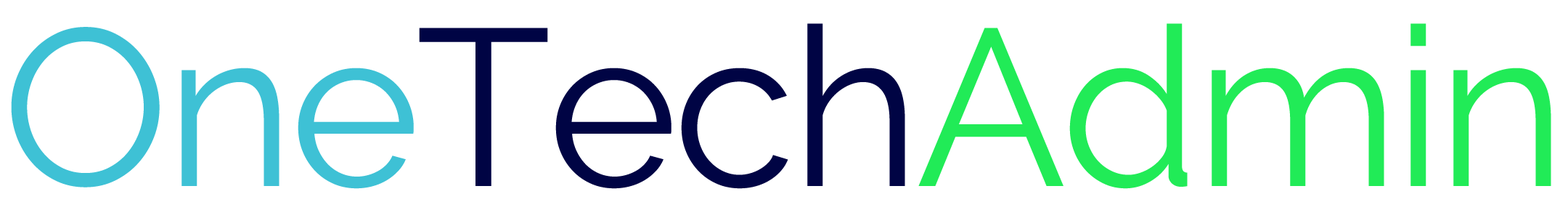
<style>
.page{position:relative;width:1568px;height:218px;background:#ffffff}
.page>*{position:absolute;margin:0}
.t1{font:222.1px "Raleway";letter-spacing:-0.02em;color:#21eb57}
.t2{font:222.1px "Raleway";letter-spacing:-0.02em;color:#3ec1d5}
.t3{font:222.1px "Raleway";letter-spacing:-0.02em;color:#000444}
</style>
<div class="page">
<p class="t1" style="left:11px;top:23px;width:1540px;height:166px"><span class="t2">One</span><span class="t3">Tech</span>Admin</p>
</div>
